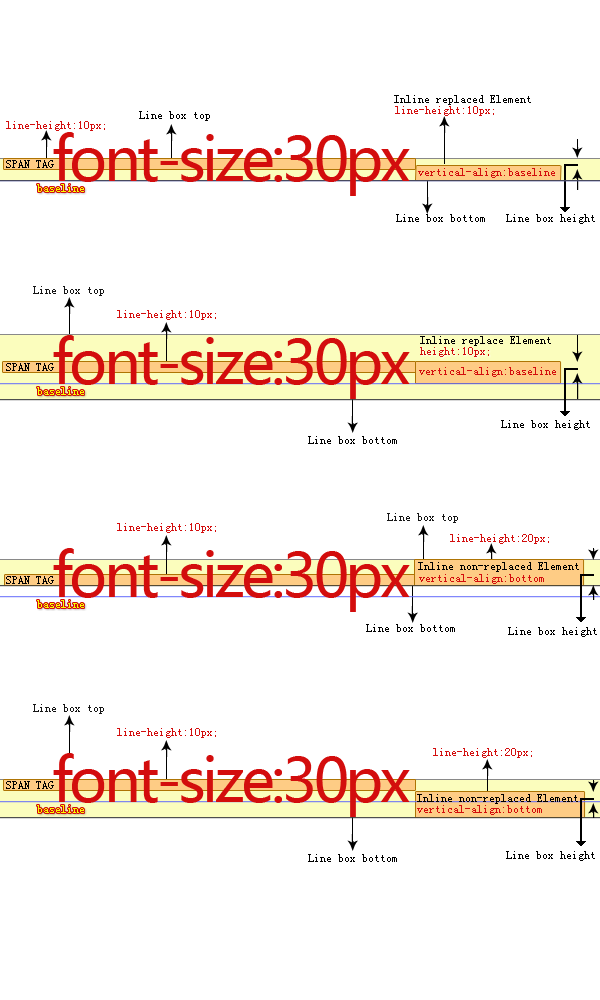
<style>
.page{position:relative;width:600px;height:1000px;background:#ffffff}
.page>*{position:absolute;margin:0}
.t1{font:12px "SimSun";color:#000000}
.t2{font:12px "SimSun";color:#d30d0d}
.t3{font:60px "MicrosoftYaHei";letter-spacing:-0.06em;color:#d30d0d}
.t4{font:12px "SimSun";color:#f6ff00}
.t5{font:12px "SimSun";color:#151515}
</style>
<div class="page">
<p class="t1" style="left:394px;top:95px;width:137px;height:10px">Inline replaced Element</p>
<p class="t1" style="left:139px;top:111px;width:71px;height:10px">Line box top</p>
<p class="t2" style="left:395px;top:106px;width:99px;height:10px">line-height:10px;</p>
<p class="t2" style="left:6px;top:121px;width:99px;height:10px">line-height:10px;</p>
<p class="t3" style="left:53px;top:132px;width:357px;height:64px">font-size:30px</p>
<p class="t1" style="left:6px;top:160px;width:48px;height:8px">SPAN TAG</p>
<p class="t2" style="left:418px;top:168px;width:137px;height:10px">vertical-align:baseline</p>
<p class="t4" style="left:37px;top:184px;width:47px;height:8px">baseline</p>
<p class="t1" style="left:396px;top:214px;width:89px;height:8px">Line box bottom</p>
<p class="t1" style="left:506px;top:214px;width:89px;height:10px">Line box height</p>
<p class="t5" style="left:33px;top:286px;width:71px;height:10px">Line box top</p>
<p class="t2" style="left:117px;top:310px;width:99px;height:10px">line-height:10px;</p>
<p class="t3" style="left:53px;top:335px;width:357px;height:64px">font-size:30px</p>
<p class="t1" style="left:420px;top:336px;width:131px;height:10px">Inline replace Element</p>
<p class="t2" style="left:420px;top:347px;width:69px;height:10px">height:10px;</p>
<p class="t1" style="left:6px;top:363px;width:48px;height:8px">SPAN TAG</p>
<p class="t2" style="left:419px;top:367px;width:137px;height:10px">vertical-align:baseline</p>
<p class="t4" style="left:37px;top:387px;width:47px;height:8px">baseline</p>
<p class="t1" style="left:501px;top:420px;width:89px;height:10px">Line box height</p>
<p class="t1" style="left:308px;top:436px;width:89px;height:8px">Line box bottom</p>
<p class="t5" style="left:387px;top:513px;width:71px;height:10px">Line box top</p>
<p class="t2" style="left:117px;top:523px;width:99px;height:10px">line-height:10px;</p>
<p class="t2" style="left:450px;top:534px;width:99px;height:10px">line-height:20px;</p>
<p class="t3" style="left:53px;top:548px;width:357px;height:64px">font-size:30px</p>
<p class="t1" style="left:418px;top:562px;width:161px;height:10px">Inline non-replaced Element</p>
<p class="t1" style="left:6px;top:576px;width:48px;height:8px">SPAN TAG</p>
<p class="t2" style="left:419px;top:574px;width:125px;height:10px">vertical-align:bottom</p>
<p class="t4" style="left:37px;top:600px;width:47px;height:8px">baseline</p>
<p class="t1" style="left:366px;top:624px;width:89px;height:8px">Line box bottom</p>
<p class="t1" style="left:508px;top:627px;width:89px;height:10px">Line box height</p>
<p class="t5" style="left:33px;top:704px;width:71px;height:10px">Line box top</p>
<p class="t2" style="left:117px;top:728px;width:99px;height:10px">line-height:10px;</p>
<p class="t2" style="left:433px;top:748px;width:99px;height:10px">line-height:20px;</p>
<p class="t3" style="left:53px;top:753px;width:357px;height:64px">font-size:30px</p>
<p class="t1" style="left:6px;top:781px;width:48px;height:8px">SPAN TAG</p>
<p class="t1" style="left:417px;top:794px;width:161px;height:10px">Inline non-replaced Element</p>
<p class="t4" style="left:37px;top:805px;width:47px;height:8px">baseline</p>
<p class="t2" style="left:417px;top:805px;width:125px;height:10px">vertical-align:bottom</p>
<p class="t1" style="left:308px;top:854px;width:89px;height:8px">Line box bottom</p>
<p class="t1" style="left:506px;top:851px;width:89px;height:10px">Line box height</p>
</div>
